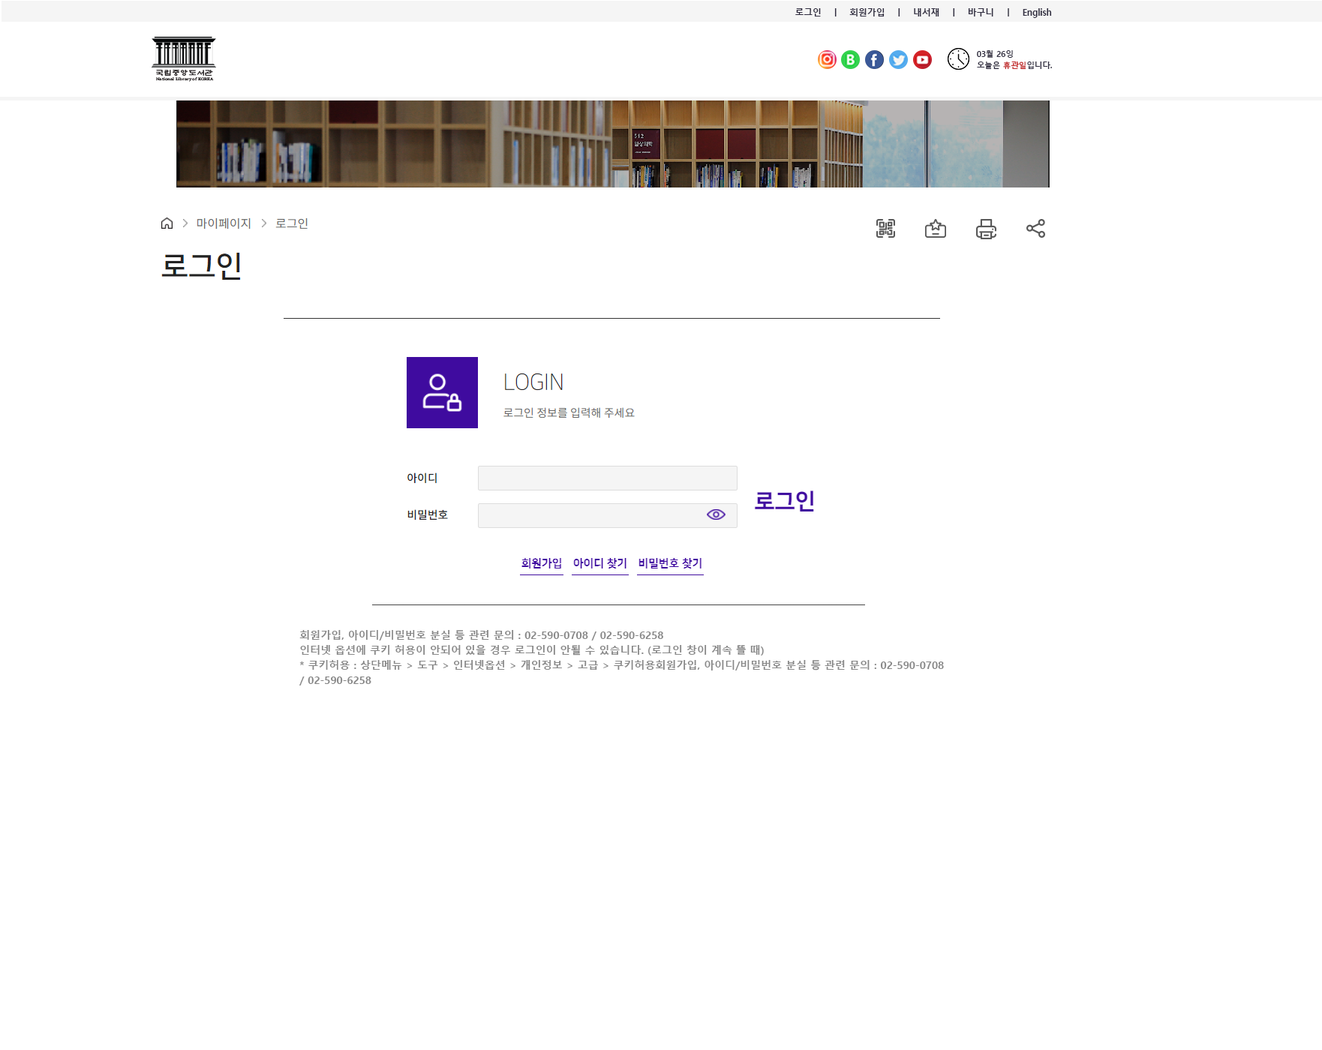
<style>
.page{position:relative;width:1322px;height:1050px;background:#ffffff}
.page>*{position:absolute;margin:0}
.t1{font:9px "MalgunGothicBold";letter-spacing:-0.02em;color:#312e41}
.t2{font:7.9px/11.2px "MalgunGothicBold";color:#312e41}
.t3{font:7.9px/11.2px "MalgunGothicBold";color:#c22727}
.t4{font:10.5px/15px "MalgunGothicBold";color:#888888}
.t5{font:10.5px/15px "MalgunGothicBold";color:#f5f5f5}
</style>
<div class="page">
<p class="t1" style="left:795px;top:8px;width:257px;height:10px">로그인 ㅣ 회원가입 ㅣ 내서재 ㅣ 바구니 ㅣ English</p>
<p class="t2" style="left:976px;top:50px;width:76px;height:20px">03월 26잉<br>오늘은 <span class="t3">휴관일</span>입니다.</p>
<p class="t4" style="left:299px;top:630px;width:645px;height:56px">회원가입, 아이디/비밀번호 분실 등 관련 문의 : 02-590-0708 / 02-590-6258<br>인터넷 옵션에 쿠키 허용이 안되어 있을 경우 로그인이 안될 수 있습니다. (로그인 창이 계속 뜰 때)<br>* 쿠키허용 : 상단메뉴 &gt; 도구 &gt; 인터넷옵션 &gt; 개인정보 &gt; 고급 &gt; 쿠키허용회원가입, 아이디/비밀번호 분실 등 관련 문의 : 02-590-0708 / 02-590-6258<br><span class="t5">인터넷 옵션에 쿠키 허용이 안되어 있을 경우 로그인이 안될 수 있습니다. (로그인 창이 계속 뜰 때)<br>* 쿠키허용 : 상단메뉴 &gt; 도구 &gt; 인터넷옵션 &gt; 개인정보 &gt; 고급 &gt; 쿠키허용</span></p>
</div>
